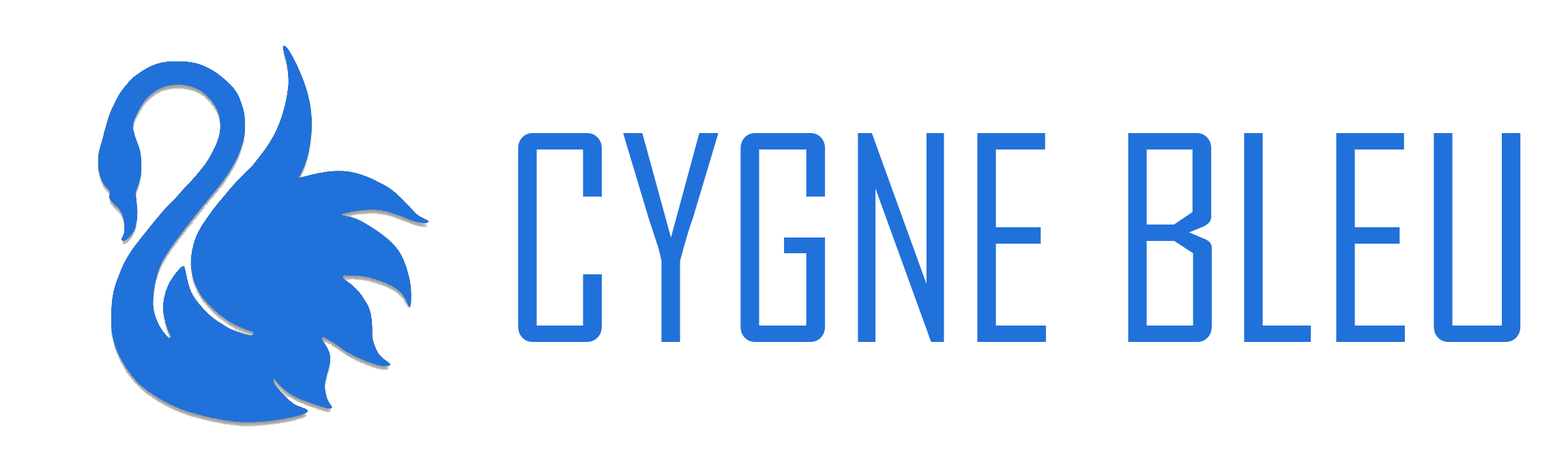
<style>
.page{position:relative;width:1568px;height:475px;background:#ffffff}
.page>*{position:absolute;margin:0}
.t1{font:272.9px "AgencyFB-Reg";color:#2171da}
</style>
<div class="page">
<p class="t1" style="left:518px;top:133px;width:1003px;height:209px">CYGNE BLEU</p>
</div>
